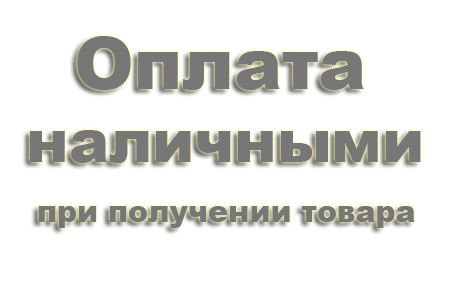
<style>
.page{position:relative;width:450px;height:282px;background:#ffffff}
.page>*{position:absolute;margin:0}
.t1{font:72px "Arial-Black";color:#777777}
.t2{font:60px "Arial-Black";color:#777777}
.t3{font:30px "Arial-Black";color:#777777}
</style>
<div class="page">
<p class="t1" style="left:77px;top:36px;width:287px;height:54px">Оплата</p>
<p class="t2" style="left:30px;top:130px;width:391px;height:33px">наличными</p>
<p class="t3" style="left:38px;top:206px;width:377px;height:22px">при получении товара</p>
</div>
